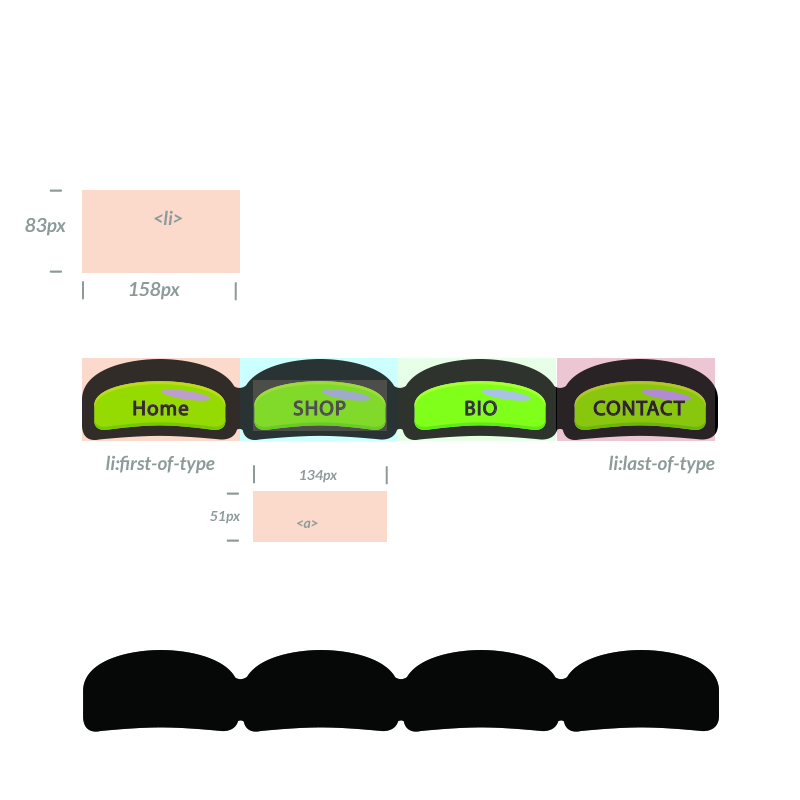
<style>
.page{position:relative;width:800px;height:800px;background:#ffffff}
.page>*{position:absolute;margin:0}
.t1{font:19px "AppleCasual";color:#8c9c99}
.t2{font:19px "Lato-BoldItalic";color:#8c9c99}
.t3{font:14px "Lato-BoldItalic";color:#8c9c99}
</style>
<div class="page">
<p class="t1" style="left:49px;top:189px;width:13px;height:3px">—</p>
<p class="t2" style="left:25px;top:218px;width:41px;height:18px">83px</p>
<p class="t2" style="left:154px;top:210px;width:28px;height:15px">&lt;li&gt;</p>
<p class="t1" style="left:49px;top:270px;width:13px;height:3px">—</p>
<p class="t2" style="left:82px;top:281px;width:98px;height:19px">|    158px</p>
<p class="t2" style="left:234px;top:282px;width:3px;height:19px">|</p>
<p class="t2" style="left:106px;top:455px;width:109px;height:19px">li:first-of-type</p>
<p class="t2" style="left:609px;top:455px;width:106px;height:19px">li:last-of-type</p>
<p class="t3" style="left:253px;top:465px;width:84px;height:19px"><span class="t2">|    </span>134px</p>
<p class="t2" style="left:385px;top:466px;width:3px;height:19px">|</p>
<p class="t1" style="left:226px;top:492px;width:13px;height:3px">—</p>
<p class="t3" style="left:210px;top:511px;width:30px;height:13px">51px</p>
<p class="t3" style="left:297px;top:520px;width:21px;height:8px">&lt;a&gt;</p>
<p class="t1" style="left:226px;top:539px;width:13px;height:3px">—</p>
</div>
